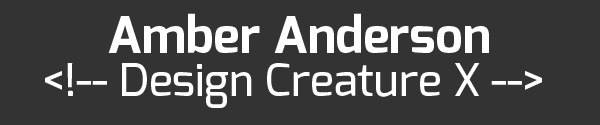
<style>
.page{position:relative;width:600px;height:125px;background:#333333}
.page>*{position:absolute;margin:0}
.t1{font:50px "Exo-Bold";color:#ffffff}
.t2{font:45px "Exo-Medium";color:#ffffff}
</style>
<div class="page">
<p class="t1" style="left:108px;top:13px;width:381px;height:40px">Amber Anderson</p>
<p class="t2" style="left:45px;top:63px;width:497px;height:45px">&lt;!-- Design Creature X --&gt;</p>
</div>
